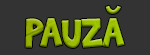
<style>
.page{position:relative;width:150px;height:55px;background:#333333}
.page>*{position:absolute;margin:0}
.t1{font:50px "Brady-Bunch"}
</style>
<div class="page">
<p class="t1" style="left:25px;top:18px;width:100px;height:30px">PAUZA</p>
</div>
